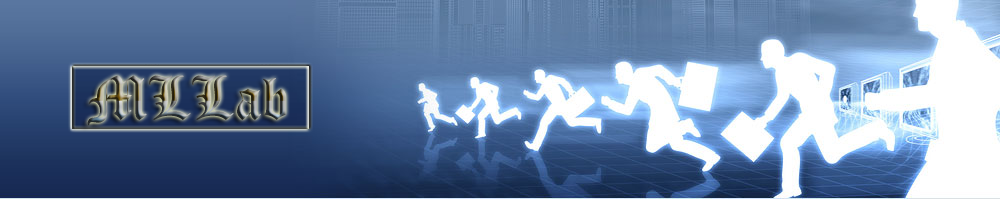
<style>
.page{position:relative;width:1000px;height:199px}
.page>*{position:absolute;margin:0}
.t1{font:60px "OldEnglishTextMT"}
</style>
<div class="page">
<p class="t1" style="left:87px;top:75px;width:199px;height:51px">MLLab</p>
</div>
